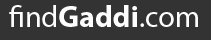
<style>
.page{position:relative;width:211px;height:40px;background:#333333}
.page>*{position:absolute;margin:0}
.t1{font:30px "MyriadPro-Bold";color:#fdfdfd}
.t2{font:30px "MyriadPro-Regular";color:#fdfdfd}
</style>
<div class="page">
<p class="t1" style="left:9px;top:5px;width:189px;height:22px"><span class="t2">find</span>Gaddi<span class="t2">.com</span></p>
</div>
